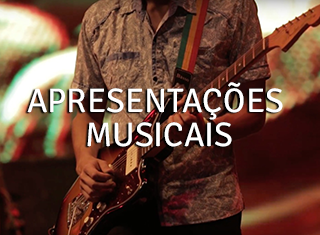
<style>
.page{position:relative;width:320px;height:235px}
.page>*{position:absolute;margin:0}
.t1{font:34px/34.6px "Signika-Regular";letter-spacing:-0.01em;color:#ffffff}
</style>
<div class="page">
<p class="t1" style="left:27px;top:82px;width:256px;height:65px;text-align:center">APRESENTAÇÕES <br>MUSICAIS</p>
</div>
